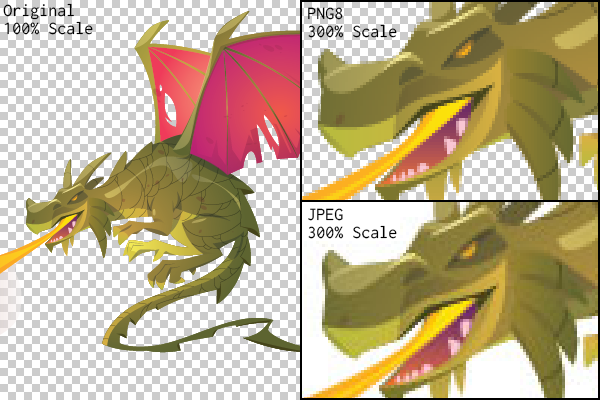
<style>
.page{position:relative;width:600px;height:400px;background:#ffffff}
.page>*{position:absolute;margin:0}
.t1{font:18px/18px "RictyDiminished-Regular";color:#000000}
</style>
<div class="page">
<p class="t1" style="left:3px;top:3px;width:90px;height:32px">Original<br>100% Scale</p>
<p class="t1" style="left:308px;top:7px;width:89px;height:31px">PNG8<br>300% Scale</p>
<p class="t1" style="left:308px;top:208px;width:89px;height:31px">JPEG<br>300% Scale</p>
</div>
